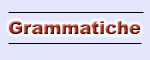
<style>
.page{position:relative;width:150px;height:60px;background:#e4e7fc}
.page>*{position:absolute;margin:0}
.t1{font:18px "Arial-Black"}
</style>
<div class="page">
<p class="t1" style="left:8px;top:21px;width:133px;height:13px">Grammatiche</p>
</div>
